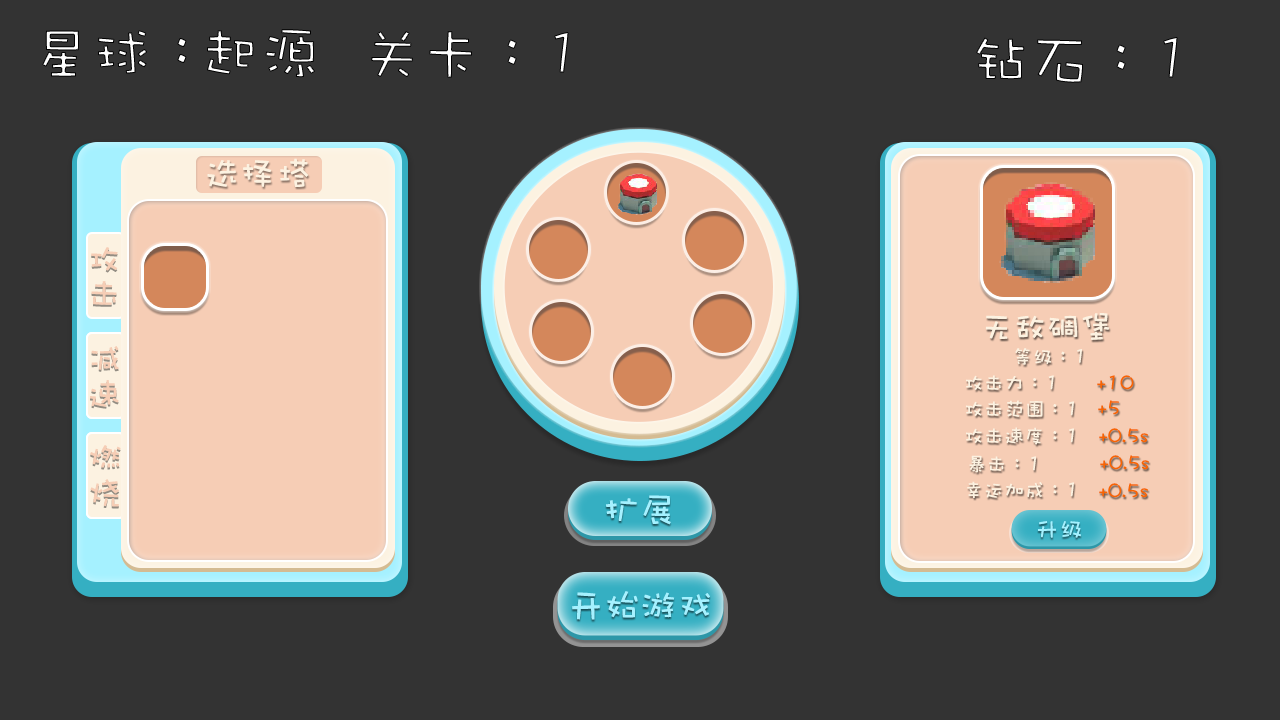
<style>
.page{position:relative;width:1280px;height:720px;background:#333333}
.page>*{position:absolute;margin:0}
.t1{font:60px "DFWaWaSC-W5"}
.t2{font:36px "DFWaWaSC-W5";color:#fcf2e1}
.t3{font:34.1px "DFWaWaSC-W5";color:#f6cdb5}
.t4{font:33.2px "DFWaWaSC-W5";color:#fcf2e1}
.t5{font:34.1px/20.5px "DFWaWaSC-W5";color:#f6cdb5}
.t6{font:20.2px "DFWaWaSC-W5";color:#fcf2e1}
.t7{font:20.2px "DFWaWaSC-W5";color:#f76503}
.t8{font:36.7px "DFWaWaSC-W5";color:#a5f1ff}
.t9{font:24.3px "DFWaWaSC-W5";color:#a5f1ff}
.t10{font:36.3px "DFWaWaSC-W5";color:#a5f1ff}
</style>
<div class="page">
<p class="t1" style="left:42px;top:30px;width:145px;height:47px">星球：</p>
<p class="t1" style="left:207px;top:29px;width:108px;height:49px">起源</p>
<p class="t1" style="left:371px;top:31px;width:198px;height:47px">关卡：1</p>
<p class="t1" style="left:976px;top:37px;width:202px;height:46px">钻石：1</p>
<p class="t2" style="left:207px;top:158px;width:102px;height:29px">选择塔</p>
<p class="t3" style="left:91px;top:247px;width:27px;height:58px">攻击</p>
<p class="t4" style="left:985px;top:312px;width:125px;height:28px">无敌碉堡</p>
<p class="t5" style="left:90px;top:346px;width:29px;height:61px;text-align:center">减速</p>
<p class="t5" style="left:90px;top:346px;width:29px;height:61px;text-align:center">减速</p>
<p class="t6" style="left:1015px;top:348px;width:67px;height:17px">等级：1</p>
<p class="t6" style="left:966px;top:375px;width:88px;height:15px">攻击力：1</p>
<p class="t7" style="left:1097px;top:375px;width:37px;height:15px">+10</p>
<p class="t6" style="left:966px;top:400px;width:108px;height:17px">攻击范围：1</p>
<p class="t7" style="left:1098px;top:400px;width:21px;height:15px">+5</p>
<p class="t6" style="left:966px;top:427px;width:108px;height:18px">攻击速度：1</p>
<p class="t7" style="left:1099px;top:428px;width:49px;height:15px">+0.5s</p>
<p class="t5" style="left:90px;top:445px;width:31px;height:62px;text-align:center">燃烧</p>
<p class="t5" style="left:90px;top:445px;width:31px;height:62px;text-align:center">燃烧</p>
<p class="t6" style="left:969px;top:455px;width:67px;height:18px">暴击：1</p>
<p class="t7" style="left:1100px;top:455px;width:49px;height:15px">+0.5s</p>
<p class="t6" style="left:967px;top:481px;width:107px;height:17px">幸运加成：1</p>
<p class="t7" style="left:1099px;top:483px;width:49px;height:15px">+0.5s</p>
<p class="t8" style="left:606px;top:495px;width:65px;height:30px">扩展</p>
<p class="t9" style="left:1038px;top:521px;width:43px;height:17px">升级</p>
<p class="t10" style="left:572px;top:591px;width:138px;height:29px">开始游戏</p>
</div>
